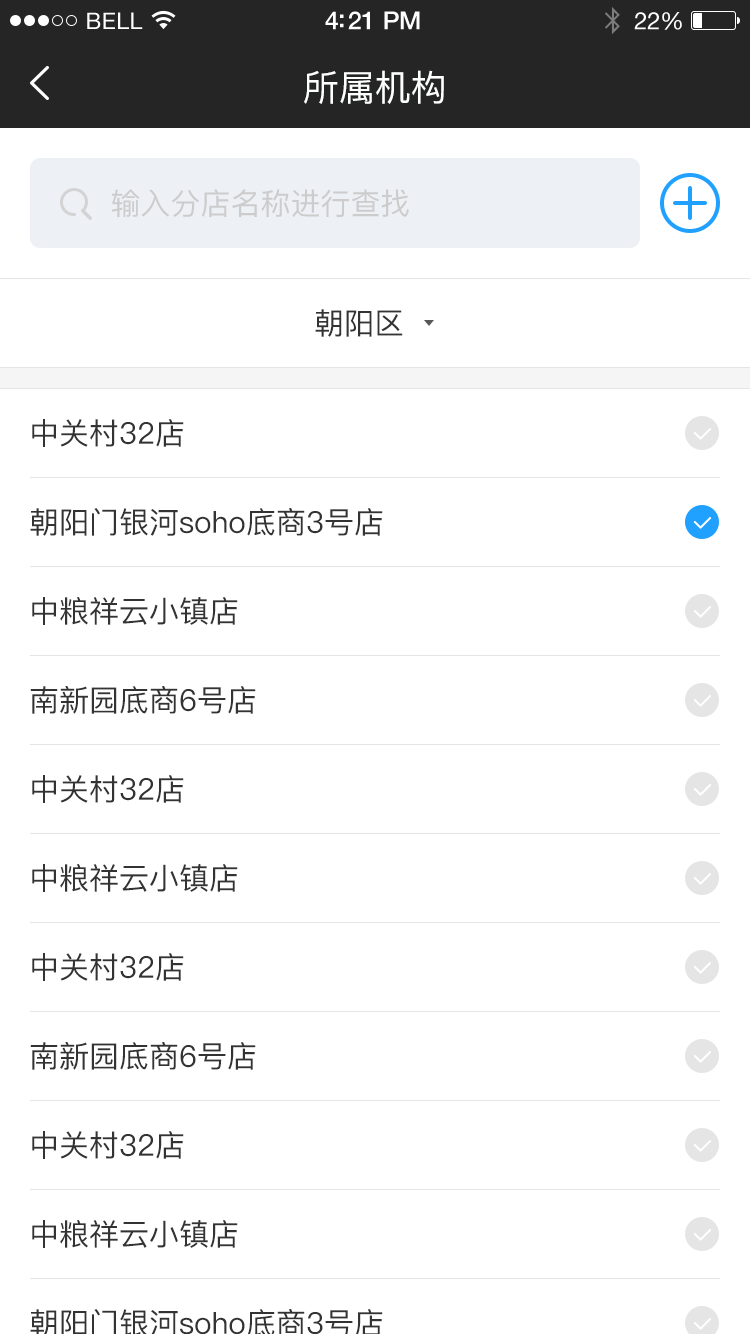
<style>
.page{position:relative;width:750px;height:1334px;background:#ffffff}
.page>*{position:absolute;margin:0}
.t1{font:23px "HelveticaNeue";letter-spacing:0.02em;color:#ffffff}
.t2{font:25px "HelveticaNeue-Medium";letter-spacing:-0.02em;color:#ffffff}
.t3{font:24px "HelveticaNeue";letter-spacing:-0.02em;color:#ffffff}
.t4{font:36px "PingFang-SC-Medium";color:#feffff}
.t5{font:30px "PingFang-SC-Medium";color:#cccccc}
.t6{font:30px "PingFang-SC-Medium";color:#333333}
</style>
<div class="page">
<p class="t1" style="left:87px;top:12px;width:56px;height:17px">BELL</p>
<p class="t2" style="left:325px;top:11px;width:95px;height:19px">4:21 PM</p>
<p class="t3" style="left:634px;top:12px;width:48px;height:18px">22%</p>
<p class="t4" style="left:304px;top:70px;width:140px;height:34px">所属机构</p>
<p class="t5" style="left:111px;top:189px;width:298px;height:28px">输入分店名称进行查找</p>
<p class="t6" style="left:315px;top:309px;width:88px;height:28px">朝阳区</p>
<p class="t6" style="left:32px;top:419px;width:152px;height:28px">中关村32店</p>
<p class="t6" style="left:30px;top:508px;width:353px;height:28px">朝阳门银河soho底商3号店</p>
<p class="t6" style="left:32px;top:597px;width:206px;height:28px">中粮祥云小镇店</p>
<p class="t6" style="left:30px;top:686px;width:226px;height:28px">南新园底商6号店</p>
<p class="t6" style="left:32px;top:775px;width:152px;height:28px">中关村32店</p>
<p class="t6" style="left:32px;top:864px;width:206px;height:28px">中粮祥云小镇店</p>
<p class="t6" style="left:32px;top:953px;width:152px;height:28px">中关村32店</p>
<p class="t6" style="left:30px;top:1042px;width:226px;height:28px">南新园底商6号店</p>
<p class="t6" style="left:32px;top:1131px;width:152px;height:28px">中关村32店</p>
<p class="t6" style="left:32px;top:1220px;width:206px;height:28px">中粮祥云小镇店</p>
</div>
